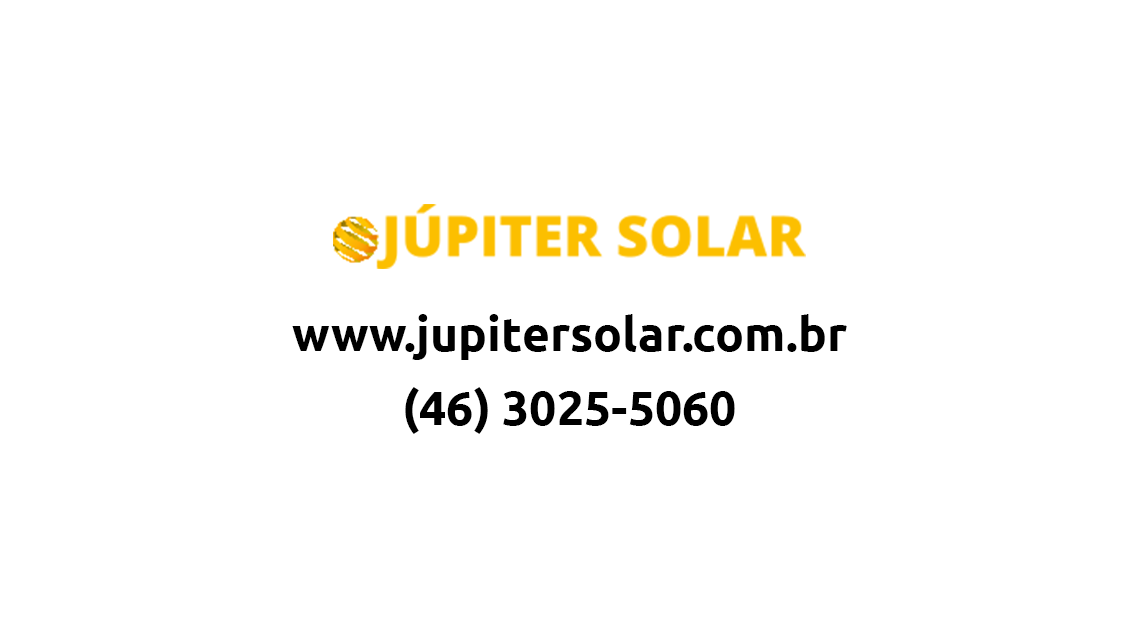
<style>
.page{position:relative;width:1138px;height:640px;background:#ffffff}
.page>*{position:absolute;margin:0}
.t1{font:48px "Ubuntu-Bold";color:#000000}
</style>
<div class="page">
<p class="t1" style="left:292px;top:314px;width:555px;height:46px">www.jupitersolar.com.br</p>
<p class="t1" style="left:405px;top:387px;width:330px;height:47px">(46) 3025-5060</p>
</div>
